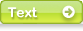
<style>
.page{position:relative;width:83px;height:31px}
.page>*{position:absolute;margin:0}
.t1{font:14px "ArialRoundedMTBold";color:#ffffff}
</style>
<div class="page">
<p class="t1" style="left:7px;top:7px;width:30px;height:11px">Text</p>
</div>
